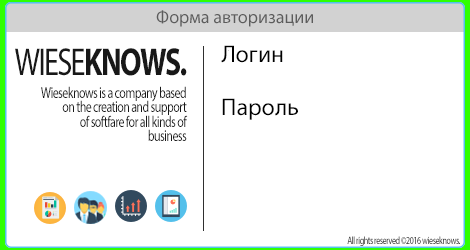
<style>
.page{position:relative;width:470px;height:250px;background:#ffffff}
.page>*{position:absolute;margin:0}
.t1{font:18px "MyriadPro-Regular";color:#5c5c5c}
.t2{font:39px "MyriadPro-Bold";letter-spacing:-0.05em;color:#181818;scale:0.77 1}
.t3{font:39px "MyriadPro-Regular";letter-spacing:-0.05em;color:#181818;scale:0.77 1}
.t4{font:24px "MyriadPro-Regular";color:#000000}
.t5{font:15.6px "MyriadPro-Regular";letter-spacing:-0.05em;color:#181818;scale:0.77 1}
.t6{font:10.4px "MyriadPro-Regular";letter-spacing:-0.05em;scale:0.77 1}
</style>
<div class="page">
<p class="t1" style="left:156px;top:10px;width:157px;height:17px">Форма авторизации</p>
<p class="t2" style="left:15px;top:48px;width:172px;height:28px"><span class="t3">WIESE</span>KNOWS.</p>
<p class="t4" style="left:221px;top:45px;width:62px;height:18px">Логин</p>
<p class="t5" style="left:41px;top:86px;width:147px;height:55px;text-align:right">Wieseknows is a company based<br>on the creation and support<br>of softfare for all kinds of<br>business</p>
<p class="t4" style="left:222px;top:98px;width:76px;height:22px">Пароль</p>
<p class="t6" style="left:347px;top:236px;width:113px;height:10px">All rights reserved ©2016 wieseknows.</p>
</div>
